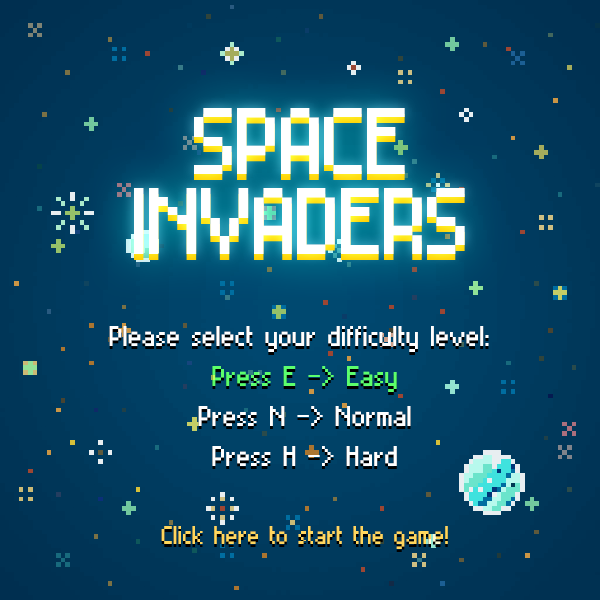
<style>
.page{position:relative;width:600px;height:600px}
.page>*{position:absolute;margin:0}
.t1{font:75.3px/80.4px "MiniSet2";letter-spacing:-0.05em;color:#ffffff}
.t2{font:22.8px/40px "MiniSet2";letter-spacing:-0.02em;color:#ffffff}
.t3{font:22.8px/40px "MiniSet2";letter-spacing:-0.02em;color:#5cff00}
.t4{font:20px/40px "MiniSet2";letter-spacing:-0.02em;color:#ffca00}
</style>
<div class="page">
<p class="t1" style="left:134px;top:108px;width:331px;height:146px;text-align:center">SPACE<br>INVADERS</p>
<p class="t2" style="left:109px;top:326px;width:380px;height:223px;text-align:center">Please select your difficulty level: <br><span class="t3">Press E -&gt; Easy<br></span>Press N -&gt; Normal<br>Press H -&gt; Hard<br><br><span class="t4">Click here to start the game!</span></p>
</div>
